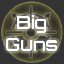
<style>
.page{position:relative;width:64px;height:64px;background:#333333}
.page>*{position:absolute;margin:0}
.t1{font:18px "Orbitron-Medium";color:#ffffff}
</style>
<div class="page">
<p class="t1" style="left:6px;top:15px;width:52px;height:36px;text-align:center">Big<br>Guns</p>
</div>
